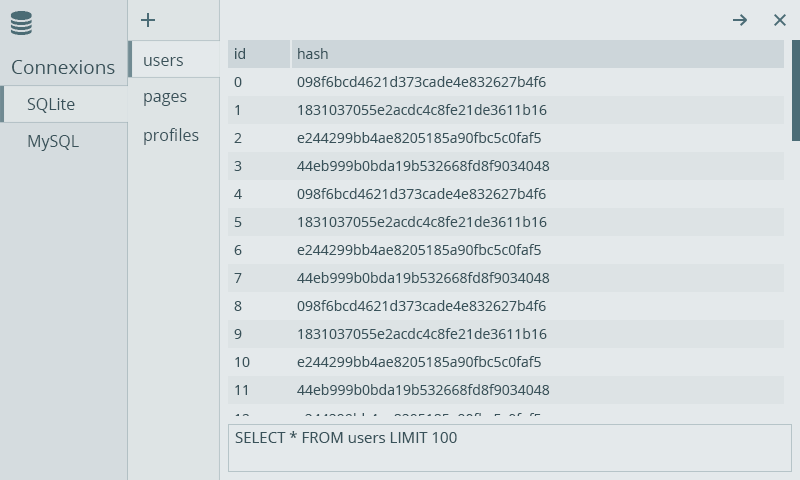
<style>
.page{position:relative;width:800px;height:480px;background:#e4e9eb}
.page>*{position:absolute;margin:0}
.t1{font:14px "OpenSans";color:#364e55}
.t2{font:19px "OpenSans";color:#364e55}
.t3{font:16px "OpenSans";color:#364e55}
.t4{font:14px "OpenSans";color:#e4e9eb}
.t5{font:15px "OpenSans";color:#364e55}
</style>
<div class="page">
<p class="t1" style="left:235px;top:48px;width:10px;height:11px">id</p>
<p class="t1" style="left:298px;top:48px;width:30px;height:11px">hash</p>
<p class="t2" style="left:12px;top:60px;width:103px;height:14px">Connexions</p>
<p class="t3" style="left:144px;top:57px;width:39px;height:9px">users</p>
<p class="t1" style="left:234px;top:77px;width:8px;height:10px">0</p>
<p class="t1" style="left:297px;top:76px;width:249px;height:11px">098f6bcd4621d373cade4e832627b4f6</p>
<p class="t3" style="left:27px;top:98px;width:48px;height:15px">SQLite</p>
<p class="t3" style="left:144px;top:93px;width:43px;height:13px">pages</p>
<p class="t1" style="left:235px;top:105px;width:4px;height:10px">1</p>
<p class="t1" style="left:298px;top:104px;width:249px;height:11px">1831037055e2acdc4c8fe21de3611b16</p>
<p class="t3" style="left:28px;top:135px;width:51px;height:16px">MySQL</p>
<p class="t3" style="left:144px;top:128px;width:55px;height:17px">profiles</p>
<p class="t1" style="left:234px;top:133px;width:8px;height:10px">2</p>
<p class="t1" style="left:297px;top:132px;width:244px;height:11px">e244299bb4ae8205185a90fbc5c0faf5</p>
<p class="t1" style="left:234px;top:161px;width:8px;height:10px">3</p>
<p class="t1" style="left:297px;top:160px;width:253px;height:11px">44eb999b0bda19b532668fd8f9034048</p>
<p class="t1" style="left:234px;top:189px;width:8px;height:10px">4</p>
<p class="t1" style="left:297px;top:188px;width:249px;height:11px">098f6bcd4621d373cade4e832627b4f6</p>
<p class="t1" style="left:234px;top:217px;width:8px;height:10px">5</p>
<p class="t1" style="left:298px;top:216px;width:249px;height:11px">1831037055e2acdc4c8fe21de3611b16</p>
<p class="t1" style="left:234px;top:245px;width:8px;height:10px">6</p>
<p class="t1" style="left:297px;top:244px;width:244px;height:11px">e244299bb4ae8205185a90fbc5c0faf5</p>
<p class="t1" style="left:234px;top:273px;width:8px;height:10px">7</p>
<p class="t1" style="left:297px;top:272px;width:253px;height:11px">44eb999b0bda19b532668fd8f9034048</p>
<p class="t1" style="left:234px;top:301px;width:8px;height:10px">8</p>
<p class="t1" style="left:297px;top:300px;width:249px;height:11px">098f6bcd4621d373cade4e832627b4f6</p>
<p class="t1" style="left:234px;top:329px;width:8px;height:10px">9</p>
<p class="t1" style="left:298px;top:328px;width:249px;height:11px">1831037055e2acdc4c8fe21de3611b16</p>
<p class="t1" style="left:235px;top:357px;width:15px;height:10px">10</p>
<p class="t1" style="left:297px;top:356px;width:244px;height:11px">e244299bb4ae8205185a90fbc5c0faf5</p>
<p class="t1" style="left:235px;top:385px;width:12px;height:10px">11</p>
<p class="t1" style="left:297px;top:384px;width:253px;height:11px">44eb999b0bda19b532668fd8f9034048</p>
<p class="t4" style="left:235px;top:414px;width:15px;height:10px">12</p>
<p class="t4" style="left:297px;top:413px;width:244px;height:11px">e244299bb4ae8205185a90fbc5c0faf5</p>
<p class="t5" style="left:235px;top:431px;width:222px;height:12px">SELECT * FROM users LIMIT 100</p>
</div>
